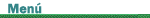
<style>
.page{position:relative;width:150px;height:18px;background:#ffffff}
.page>*{position:absolute;margin:0}
.t1{font:13.9px "FranklinGothic-Demi";color:#348588}
</style>
<div class="page">
<p class="t1" style="left:8px;top:2px;width:34px;height:12px">Menú</p>
</div>
